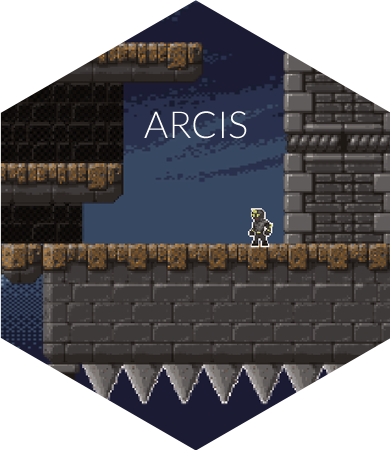
<style>
.page{position:relative;width:390px;height:450px;background:#ffffff}
.page>*{position:absolute;margin:0}
.t1{font:37.3px "Lato-Light";color:#ffffff}
</style>
<div class="page">
<p class="t1" style="left:144px;top:111px;width:103px;height:28px">ARCIS</p>
</div>
